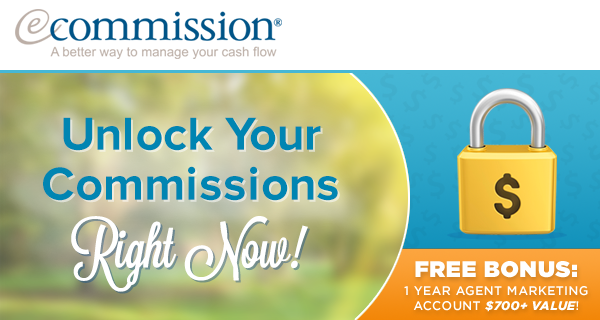
<style>
.page{position:relative;width:600px;height:320px;background:#ffffff}
.page>*{position:absolute;margin:0}
.t1{font:48.1px/50px "ProximaNova-Bold";color:#0085b2}
.t2{font:48.1px/50px "ProximaNova-Bold"}
.t3{font:57.6px "Lavanderia-Sturdy";color:#ffffff}
.t4{font:57.6px "Lavanderia-Sturdy"}
.t5{font:22.5px "Gotham-Ultra";letter-spacing:0.03em;color:#ffffff;text-transform:uppercase}
.t6{font:12.4px "Gotham-Medium";letter-spacing:0.03em;color:#ffffff;text-transform:uppercase}
.t7{font:12.4px "Gotham-BlackItalic";letter-spacing:0.03em;color:#ffffff;text-transform:uppercase}
</style>
<div class="page">
<p class="t1" style="left:43px;top:117px;width:295px;height:84px;text-align:center">Unlock Your<br>Commissions</p>
<p class="t2" style="left:45px;top:119px;width:295px;height:84px;text-align:center">Unlock Your<br>Commissions</p>
<p class="t3" style="left:71px;top:216px;width:237px;height:76px">Right Now!</p>
<p class="t4" style="left:73px;top:218px;width:237px;height:76px">Right Now!</p>
<p class="t5" style="left:415px;top:261px;width:162px;height:17px">Free Bonus:</p>
<p class="t6" style="left:404px;top:286px;width:184px;height:26px;text-align:center">1 Year Agent Marketing<br>Account <span class="t7">$700+ value</span>!</p>
</div>
